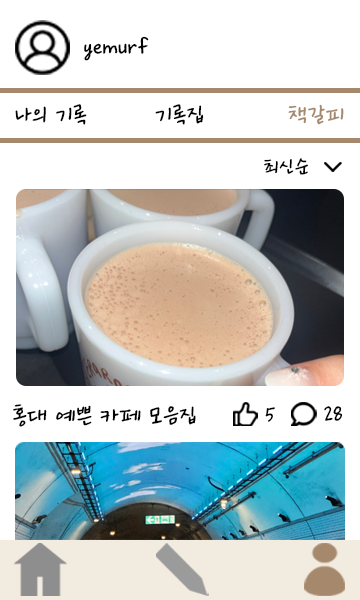
<style>
.page{position:relative;width:360px;height:600px;background:#ffffff}
.page>*{position:absolute;margin:0}
.t1{font:25px "Ownglyph_Dailyokja-Rg";color:#000000}
.t2{font:25px "Ownglyph_Dailyokja-Rg";color:#a6886d}
.t3{font:22px "Ownglyph_Dailyokja-Rg";color:#000000}
</style>
<div class="page">
<p class="t1" style="left:84px;top:36px;width:65px;height:25px">yemurf</p>
<p class="t1" style="left:15px;top:104px;width:72px;height:21px">나의 기록</p>
<p class="t1" style="left:155px;top:104px;width:49px;height:21px">기록집</p>
<p class="t2" style="left:288px;top:104px;width:56px;height:21px">책갈피</p>
<p class="t3" style="left:264px;top:158px;width:44px;height:17px">최신순</p>
<p class="t1" style="left:13px;top:404px;width:183px;height:23px">홍대 예쁜 카페 모음집</p>
<p class="t3" style="left:265px;top:407px;width:10px;height:15px">5</p>
<p class="t3" style="left:324px;top:406px;width:19px;height:15px">28</p>
</div>
